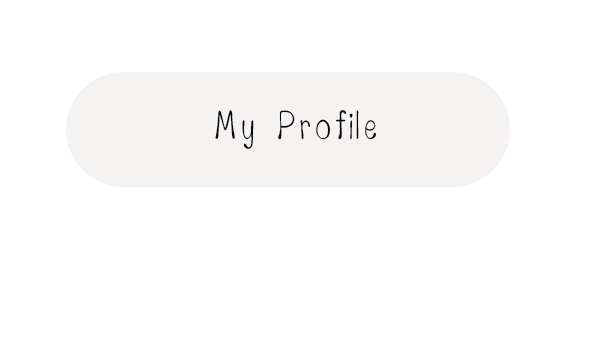
<style>
.page{position:relative;width:591px;height:354px;background:#ffffff}
.page>*{position:absolute;margin:0}
.t1{font:50px "Bangnampueng";color:#080808}
</style>
<div class="page">
<p class="t1" style="left:215px;top:110px;width:162px;height:39px">My Profile</p>
</div>
